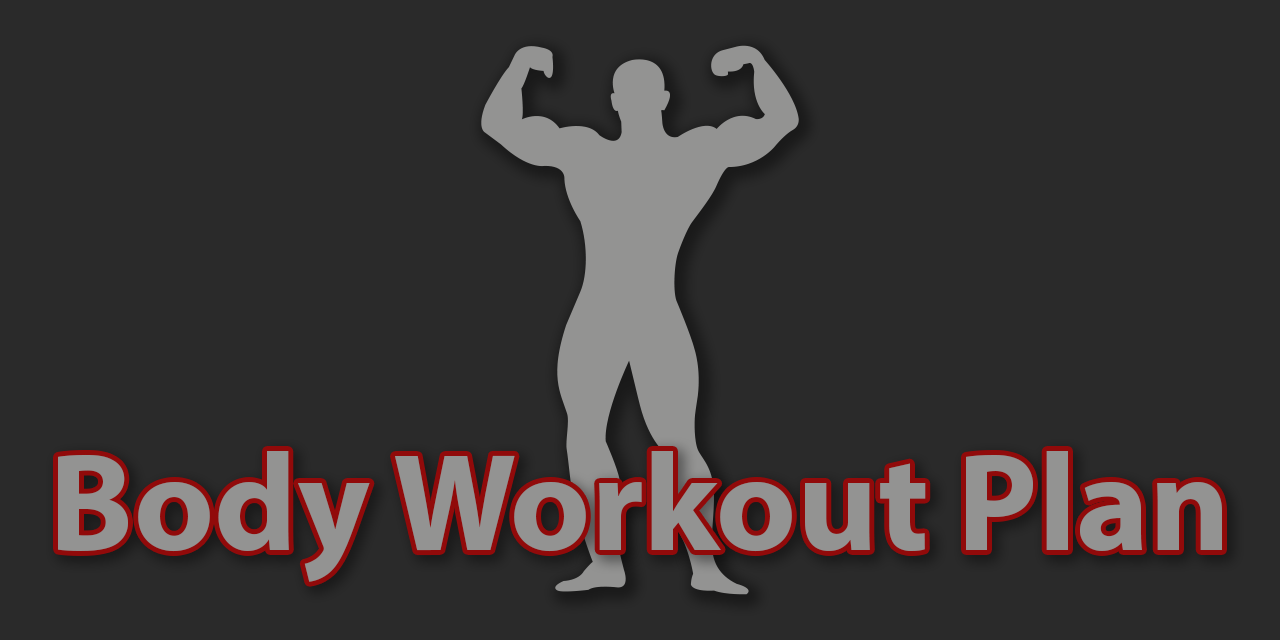
<style>
.page{position:relative;width:1280px;height:640px;background:#2a2a2a}
.page>*{position:absolute;margin:0}
.t1{font:139px "MyriadPro-Bold";color:#939392}
</style>
<div class="page">
<p class="t1" style="left:58px;top:451px;width:1164px;height:131px">Body Workout Plan</p>
</div>
